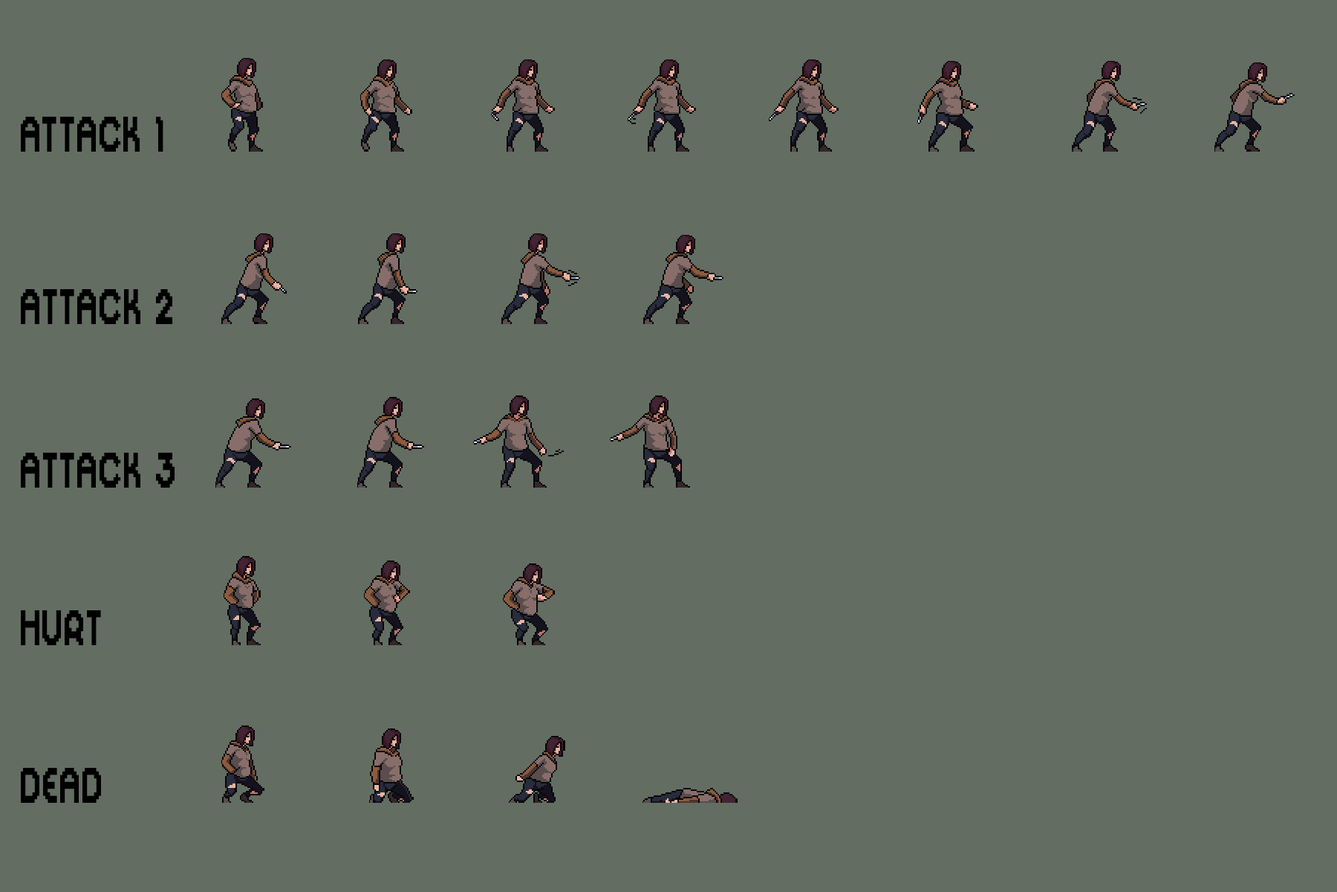
<style>
.page{position:relative;width:1337px;height:892px;background:#636d62}
.page>*{position:absolute;margin:0}
.t1{font:55.7px "DigitalDisco";letter-spacing:0.03em;color:#000000;scale:0.67 1}
</style>
<div class="page">
<p class="t1" style="left:21px;top:117px;width:142px;height:35px">ATTACK 1</p>
<p class="t1" style="left:21px;top:289px;width:151px;height:35px">ATTACK 2<br><br> 2 3</p>
<p class="t1" style="left:21px;top:452px;width:154px;height:35px">ATTACK 3</p>
<p class="t1" style="left:21px;top:610px;width:80px;height:35px">HURT</p>
<p class="t1" style="left:21px;top:768px;width:80px;height:34px">DEAD</p>
</div>
